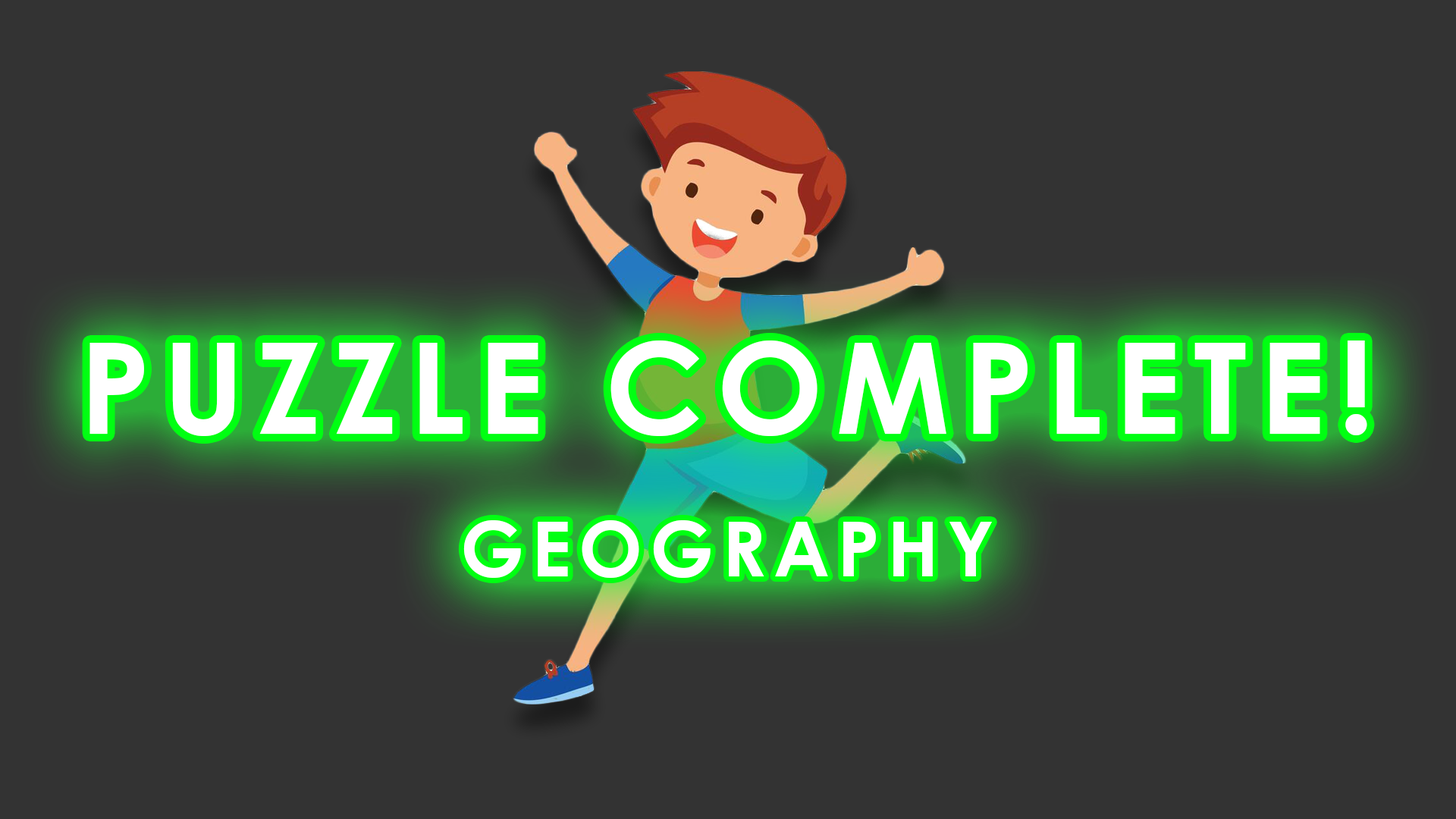
<style>
.page{position:relative;width:1456px;height:819px;background:#333333}
.page>*{position:absolute;margin:0}
.t1{font:126.9px "CenturyGothic-Bold";letter-spacing:0.1em;color:#ffffff}
.t2{font:76.1px "CenturyGothic-Bold";letter-spacing:0.1em;color:#ffffff}
</style>
<div class="page">
<p class="t1" style="left:89px;top:340px;width:1278px;height:96px">PUZZLE COMPLETE!</p>
<p class="t2" style="left:463px;top:520px;width:529px;height:58px">GEOGRAPHY</p>
</div>
